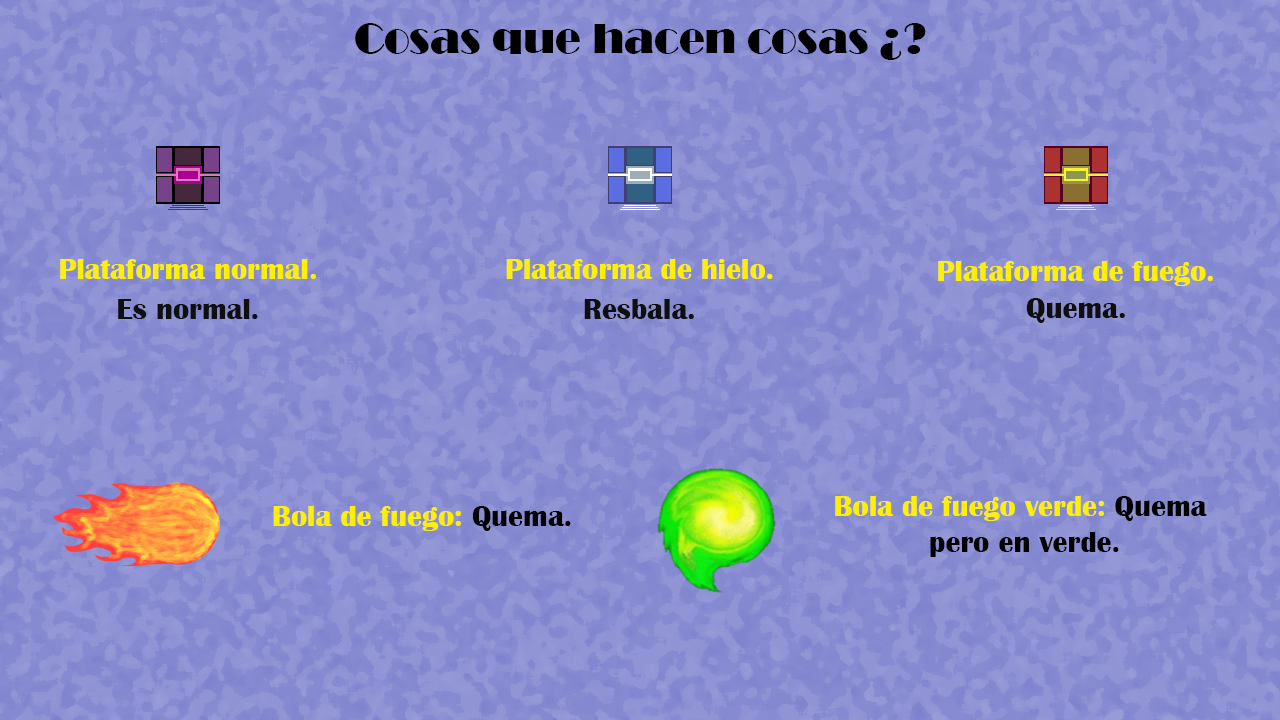
<style>
.page{position:relative;width:1280px;height:720px;background:#868ad1}
.page>*{position:absolute;margin:0}
.t1{font:42.8px "Broadway";color:#000000}
.t2{font:30px "BritannicBold";color:#fff000}
.t3{font:30px "BritannicBold";color:#0f0f0f}
.t4{font:30px "BritannicBold";color:#000000}
</style>
<div class="page">
<p class="t1" style="left:355px;top:23px;width:571px;height:37px">Cosas que hacen cosas ¿?</p>
<p class="t2" style="left:60px;top:258px;width:256px;height:21px">Plataforma normal.</p>
<p class="t2" style="left:506px;top:258px;width:267px;height:21px">Plataforma de hielo.</p>
<p class="t2" style="left:938px;top:260px;width:275px;height:26px">Plataforma de fuego.</p>
<p class="t3" style="left:118px;top:298px;width:140px;height:21px">Es normal.</p>
<p class="t3" style="left:584px;top:298px;width:110px;height:21px">Resbala.</p>
<p class="t3" style="left:1026px;top:298px;width:99px;height:25px">Quema.</p>
<p class="t4" style="left:835px;top:495px;width:372px;height:62px;text-align:center"><span class="t2">Bola de fuego verde: </span>Quema<br> pero en verde.</p>
<p class="t2" style="left:273px;top:505px;width:298px;height:26px">Bola de fuego: <span class="t4">Quema.</span></p>
</div>
